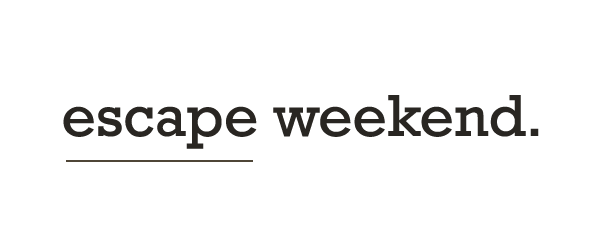
<style>
.page{position:relative;width:600px;height:238px;background:#ffffff}
.page>*{position:absolute;margin:0}
.t1{font:60px "Rockwell";color:#292622}
</style>
<div class="page">
<p class="t1" style="left:63px;top:95px;width:476px;height:54px">escape weekend.</p>
</div>
